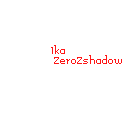
<style>
.page{position:relative;width:128px;height:128px;background:#ffffff}
.page>*{position:absolute;margin:0}
.t1{font:8px "Memoria";color:#ff1616}
.t2{font:8px "Memoria";color:#ffffff}
</style>
<div class="page">
<p class="t1" style="left:10px;top:45px;width:112px;height:23px"><span class="t2">Arte by </span>Ika<br><span class="t2">Code by</span> ZeroZshadow</p>
</div>
